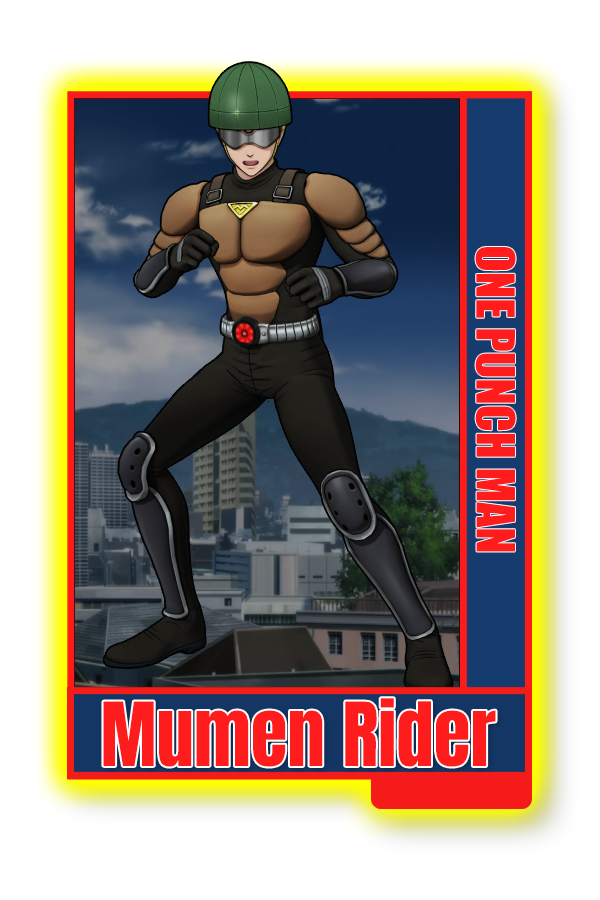
<style>
.page{position:relative;width:600px;height:900px;background:#ffffff}
.page>*{position:absolute;margin:0}
.t1{font:48.8px "Impact";color:#ff1c1c}
.t2{font:75px "Impact";color:#ff1c1c}
</style>
<div class="page">
<p class="t1" style="left:475px;top:246px;width:41px;height:306px;rotate:90deg">ONE PUNCH MAN</p>
<p class="t2" style="left:103px;top:698px;width:393px;height:69px">Mumen Rider</p>
</div>
